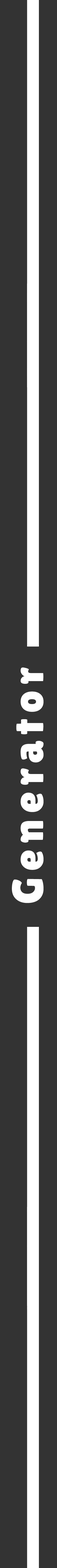
<style>
.page{position:relative;width:57px;height:1568px;background:#333333}
.page>*{position:absolute;margin:0}
.t1{font:43.9px "LilitaOne";letter-spacing:0.15em;color:#ffffff}
</style>
<div class="page">
<p class="t1" style="left:12px;top:667px;width:31px;height:236px;rotate:-90deg">Generator</p>
</div>
